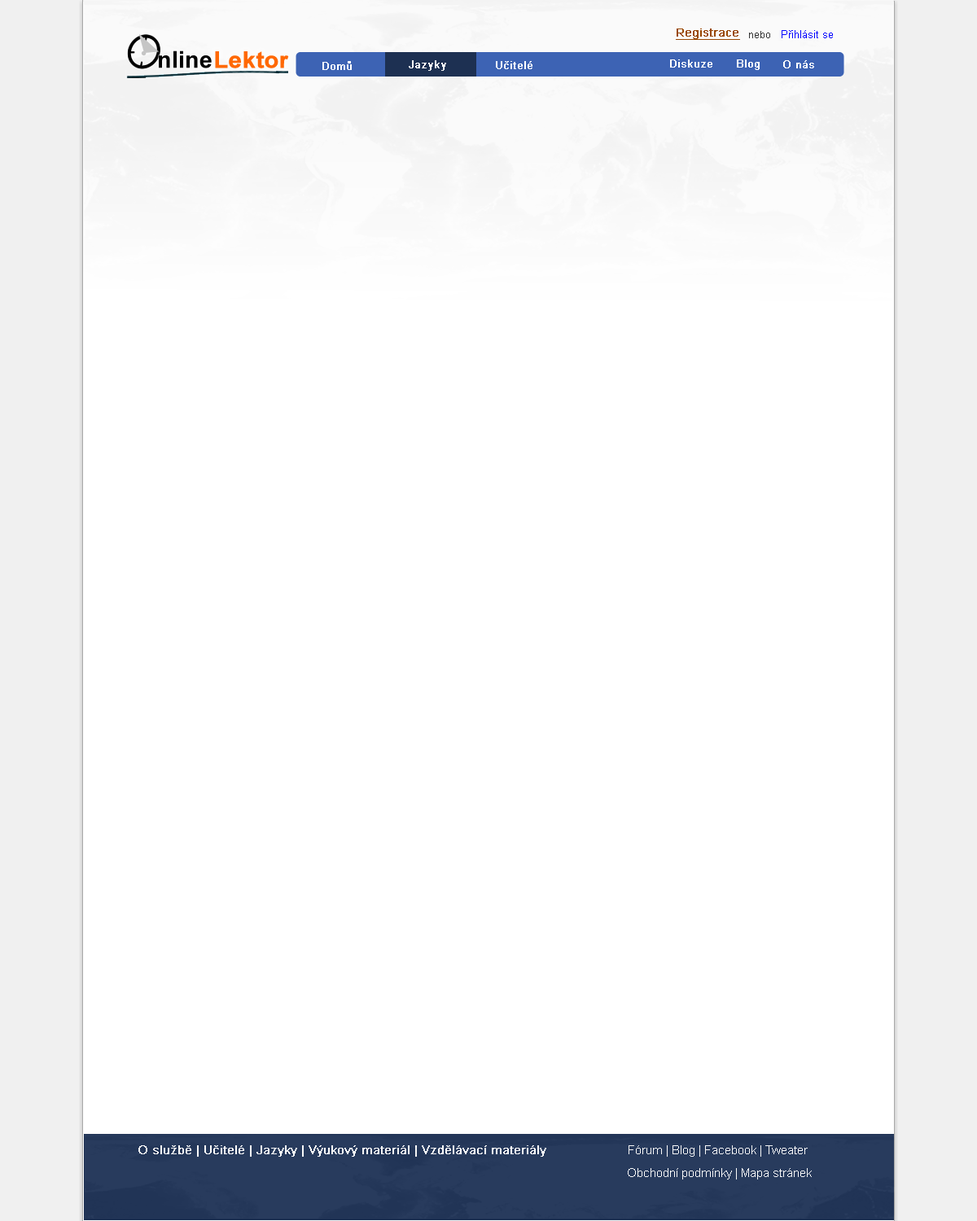
<style>
.page{position:relative;width:977px;height:1221px;background:#ffffff}
.page>*{position:absolute;margin:0}
.t1{font:9.8px "ArialMT";color:#333333}
.t2{font:10.6px "ArialMT";color:#0000ff}
.t3{font:23.2px "Arial-BoldMT";color:#000000}
.t4{font:22.7px "Arial-BoldMT";color:#ff6803;font-weight:bold;scale:1.04 1}
.t5{font:10.6px "ArialMT";color:#ffffff;font-weight:bold}
.t6{font:12.2px "ArialMT";color:#ffffff;font-weight:bold}
.t7{font:12.2px "ArialMT";color:#ffffff}
</style>
<div class="page">
<p class="t1" style="left:749px;top:31px;width:21px;height:7px">nebo</p>
<p class="t2" style="left:781px;top:30px;width:52px;height:8px">Přihlásit se</p>
<p class="t3" style="left:159px;top:50px;width:53px;height:18px">nline</p>
<p class="t4" style="left:215px;top:51px;width:74px;height:17px">Lektor</p>
<p class="t5" style="left:322px;top:61px;width:30px;height:9px">Domů</p>
<p class="t5" style="left:409px;top:60px;width:37px;height:11px">Jazyky</p>
<p class="t5" style="left:496px;top:61px;width:36px;height:8px">Učitelé</p>
<p class="t5" style="left:670px;top:59px;width:42px;height:9px">Diskuze</p>
<p class="t5" style="left:737px;top:59px;width:22px;height:11px">Blog</p>
<p class="t5" style="left:783px;top:60px;width:31px;height:8px">O nás</p>
<p class="t6" style="left:138px;top:1145px;width:408px;height:12px">O službě | Učitelé | Jazyky | Výukový materiál | Vzdělávací materiály</p>
<p class="t7" style="left:628px;top:1145px;width:179px;height:12px">Fórum | Blog | Facebook | Tweater</p>
<p class="t7" style="left:628px;top:1168px;width:183px;height:11px">Obchodní podmínky | Mapa stránek</p>
</div>
